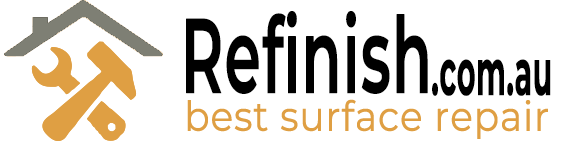
<style>
.page{position:relative;width:564px;height:142px;background:#ffffff}
.page>*{position:absolute;margin:0}
.t1{font:105.8px "Montserrat-SemiBold";color:#000000;font-weight:bold;scale:0.54 1}
.t2{font:64.8px "Montserrat-Bold";color:#000000;font-weight:bold;scale:0.44 1}
.t3{font:41.3px "Montserrat-Regular";color:#df9f43;font-weight:bold;scale:0.9 1}
</style>
<div class="page">
<p class="t1" style="left:186px;top:11px;width:242px;height:83px">Refinish</p>
<p class="t1" style="left:186px;top:11px;width:242px;height:83px">Refinish</p>
<p class="t2" style="left:432px;top:59px;width:119px;height:37px">.com.au</p>
<p class="t2" style="left:432px;top:59px;width:119px;height:37px">.com.au</p>
<p class="t3" style="left:187px;top:99px;width:361px;height:40px">best surface repair</p>
</div>
